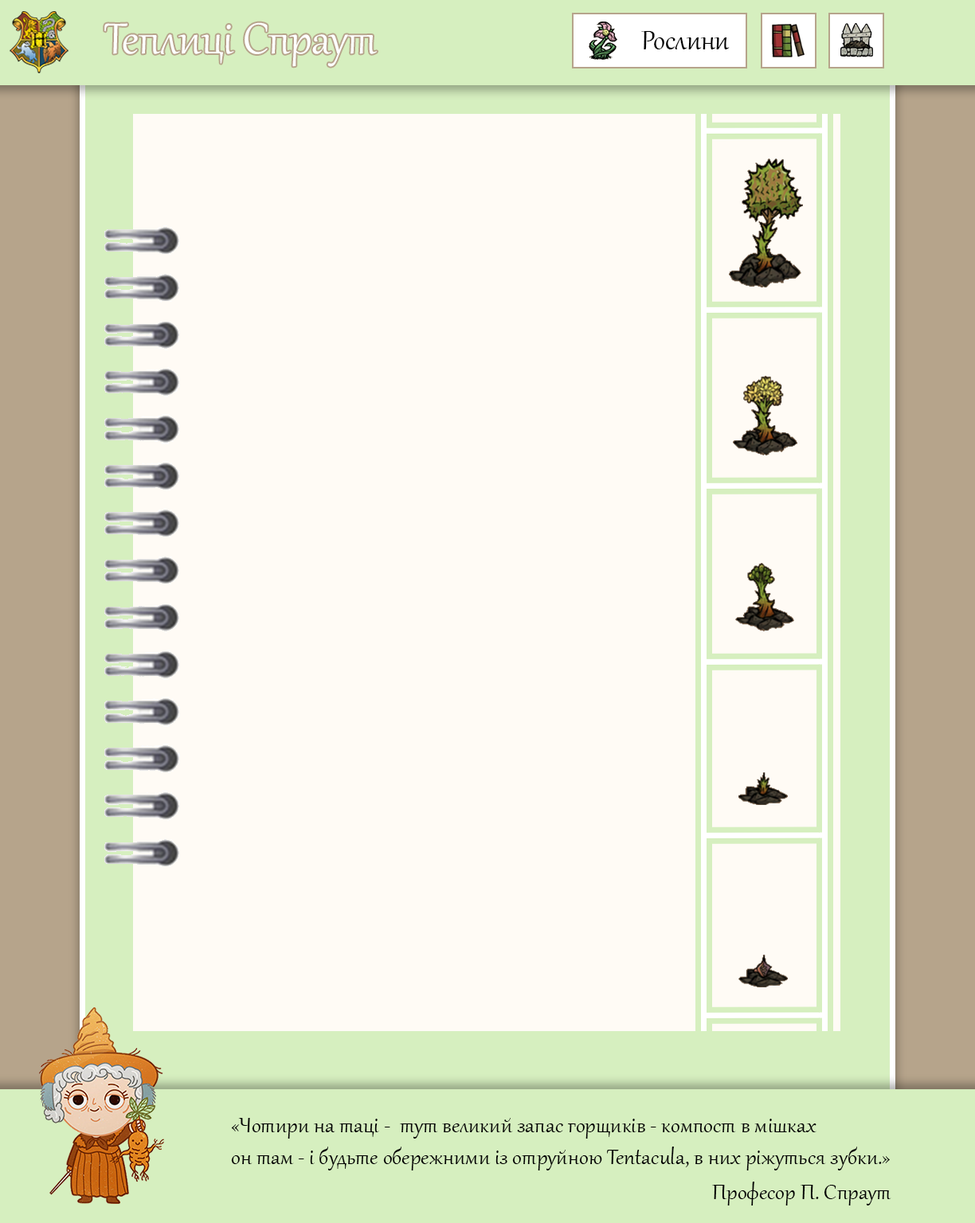
<style>
.page{position:relative;width:975px;height:1223px;background:#fffbf5}
.page>*{position:absolute;margin:0}
.t1{font:53.1px "Gabriola";color:#ffffff}
.t2{font:33.2px "Gabriola";color:#000000}
.t3{font:26.5px "Gabriola";color:#000000}
</style>
<div class="page">
<p class="t1" style="left:104px;top:22px;width:273px;height:45px">Теплиці Спраут</p>
<p class="t2" style="left:641px;top:31px;width:89px;height:18px">Рослини</p>
<p class="t3" style="left:231px;top:1118px;width:659px;height:53px">«Чотири на таці -  тут великий запас горщиків - компост в мішках<br>он там - і будьте обережними із отруйною Tentacula, в них ріжуться зубки.»</p>
<p class="t3" style="left:712px;top:1182px;width:179px;height:24px">Професор П. Спраут</p>
</div>
